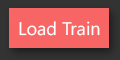
<style>
.page{position:relative;width:120px;height:60px;background:#f86565}
.page>*{position:absolute;margin:0}
.t1{font:18.3px "SegoeWP";color:#ffffff}
</style>
<div class="page">
<p class="t1" style="left:19px;top:21px;width:81px;height:15px">Load Train</p>
</div>
